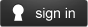
<style>
.page{position:relative;width:88px;height:27px}
.page>*{position:absolute;margin:0}
.t1{font:14.2px "ArialMT";color:#ffffff}
</style>
<div class="page">
<p class="t1" style="left:35px;top:7px;width:40px;height:14px">sign in</p>
</div>
